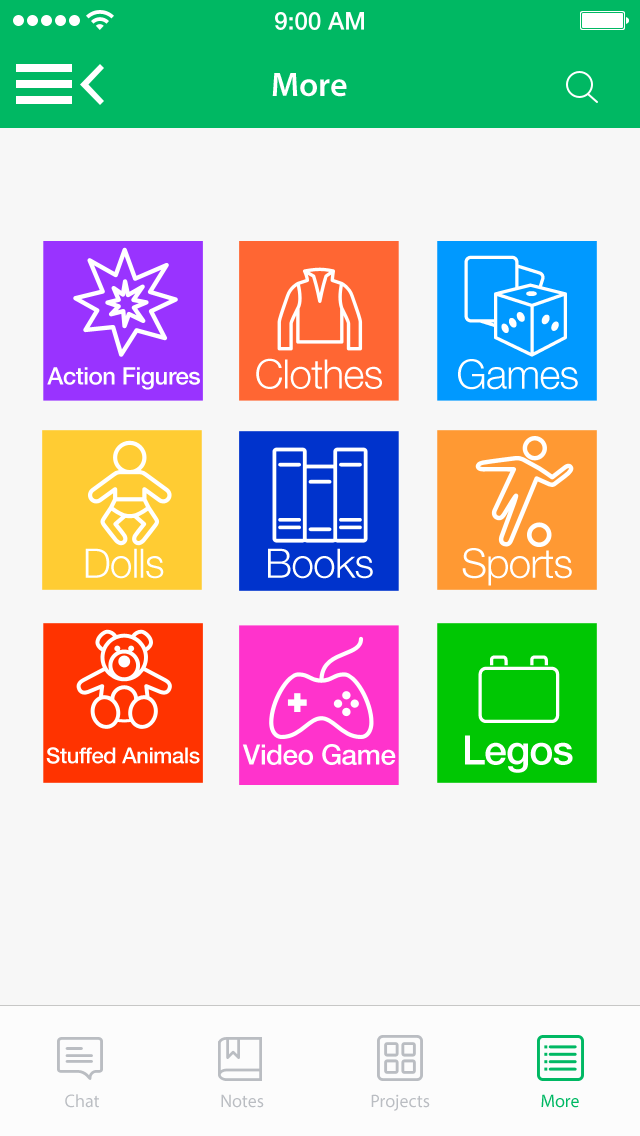
<style>
.page{position:relative;width:640px;height:1136px;background:#f7f7f7}
.page>*{position:absolute;margin:0}
.t1{font:34px "MyriadPro-Semibold";color:#ffffff}
.t2{font:40.7px "HelveticaNeue-Light";letter-spacing:-0.02em;color:#ffffff}
.t3{font:24px/19.3px "HelveticaNeue-Medium";letter-spacing:-0.02em;color:#ffffff}
.t4{font:40.7px "HelveticaNeue-Medium";letter-spacing:-0.02em;color:#ffffff}
.t5{font:22px "HelveticaNeue-Medium";letter-spacing:-0.02em;color:#ffffff}
.t6{font:28px "HelveticaNeue-Medium";letter-spacing:-0.02em;color:#ffffff}
.t7{font:18px "MyriadPro-Regular";color:#babdc2}
.t8{font:18px "MyriadPro-Regular";color:#00b863}
</style>
<div class="page">
<p class="t1" style="left:272px;top:73px;width:75px;height:24px">More</p>
<p class="t2" style="left:256px;top:358px;width:126px;height:31px">Clothes</p>
<p class="t2" style="left:458px;top:359px;width:120px;height:31px">Games</p>
<p class="t3" style="left:47px;top:367px;width:153px;height:23px;text-align:center">Action Figures<br>A</p>
<p class="t2" style="left:85px;top:548px;width:79px;height:31px">Dolls</p>
<p class="t2" style="left:268px;top:548px;width:105px;height:31px">Books</p>
<p class="t2" style="left:462px;top:548px;width:110px;height:38px">Sports</p>
<p class="t4" style="left:465px;top:735px;width:108px;height:38px">Legos</p>
<p class="t5" style="left:46px;top:747px;width:154px;height:17px">Stuffed Animals</p>
<p class="t6" style="left:242px;top:744px;width:154px;height:21px">Video Game</p>
<p class="t7" style="left:65px;top:1094px;width:34px;height:14px">Chat</p>
<p class="t7" style="left:221px;top:1094px;width:43px;height:14px">Notes</p>
<p class="t7" style="left:371px;top:1094px;width:59px;height:17px">Projects</p>
<p class="t8" style="left:541px;top:1094px;width:38px;height:14px">More</p>
</div>
